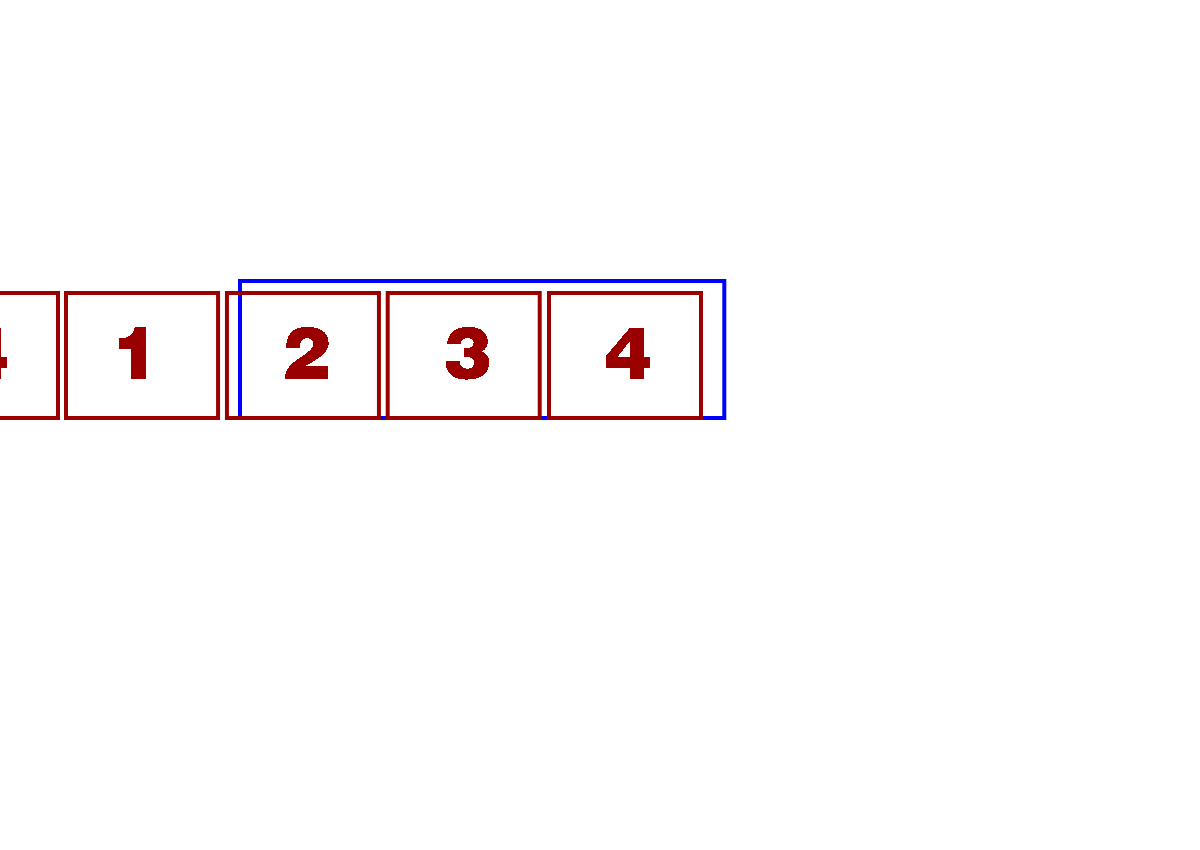
<style>
.page{position:relative;width:1200px;height:850px;background:#ffffff}
.page>*{position:absolute;margin:0}
.t1{font:72.8px "FZCCHJW--GB1-0";letter-spacing:1em;color:#9b0000}
</style>
<div class="page">
<p class="t1" style="left:119px;top:327px;width:27px;height:52px">1</p>
<p class="t1" style="left:285px;top:327px;width:44px;height:52px">2</p>
<p class="t1" style="left:446px;top:327px;width:43px;height:53px">3</p>
<p class="t1" style="left:606px;top:328px;width:44px;height:51px">4</p>
</div>
